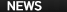
<style>
.page{position:relative;width:67px;height:12px}
.page>*{position:absolute;margin:0}
.t1{font:12.2px "HCRDotum-Bold";color:#ffffff}
</style>
<div class="page">
<p class="t1" style="left:7px;top:1px;width:35px;height:10px">NEWS</p>
</div>
